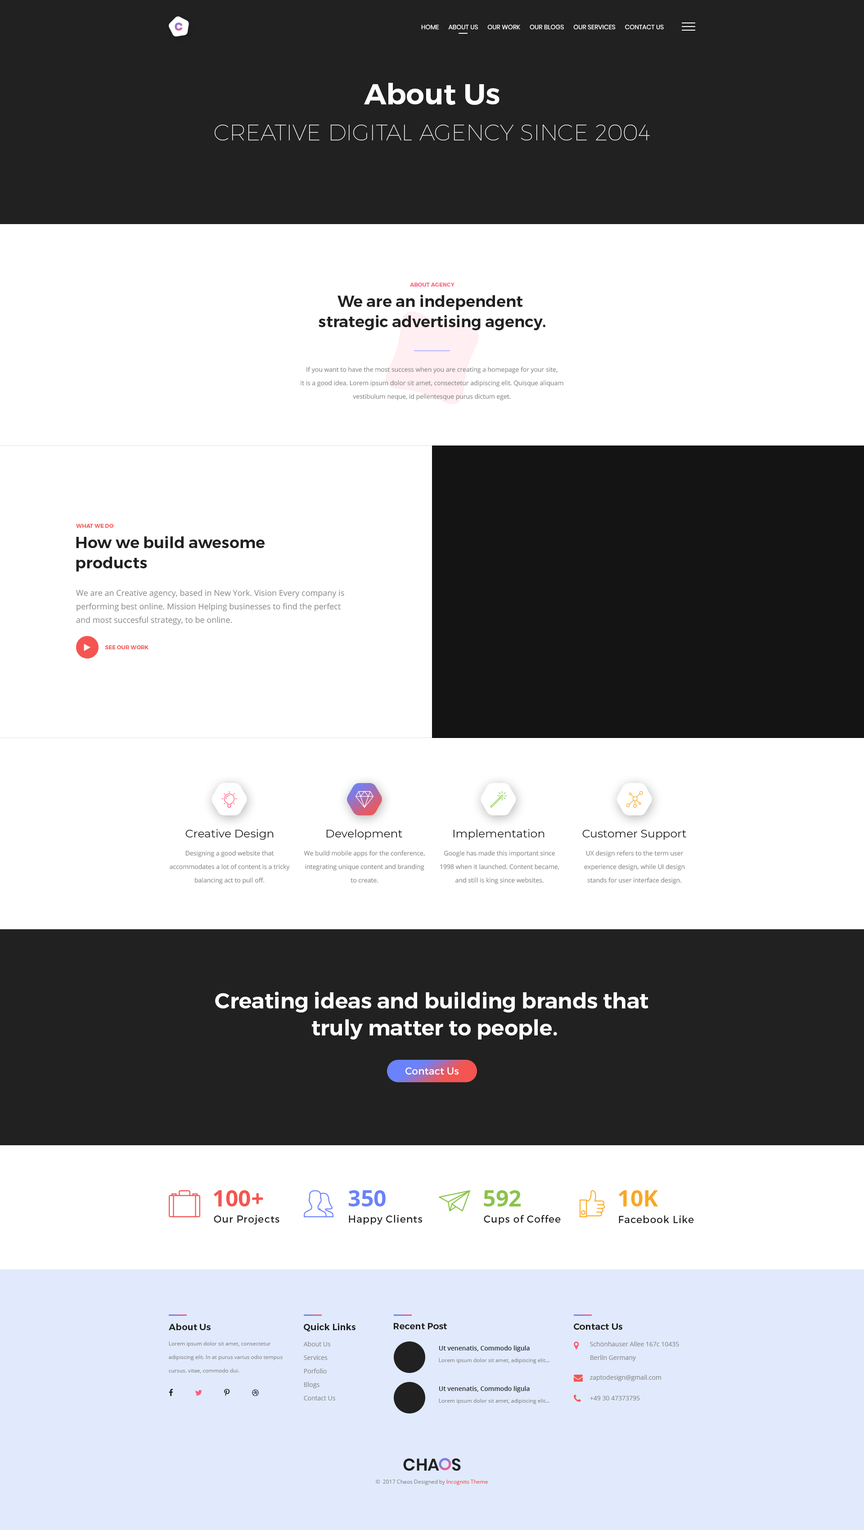
<style>
.page{position:relative;width:864px;height:1530px;background:#ffffff}
.page>*{position:absolute;margin:0}
.t1{font:11.2px "Poppins-ExtraBold";text-transform:uppercase}
.t2{font:6.3px "Poppins-Regular";color:#ffffff;text-transform:uppercase}
.t3{font:22.5px/36px "Montserrat-Hairline";color:#ffffff}
.t4{font:29.2px/36px "Montserrat-SemiBold";color:#ffffff}
.t5{font:5.4px "Montserrat-SemiBold";color:#fc5c7d;text-transform:uppercase}
.t6{font:15.7px/20.2px "Montserrat-SemiBold";color:#212121}
.t7{font:6.3px/13.5px "OpenSans";color:#878787}
.t8{font:5.4px "Montserrat-SemiBold";color:#f45551;text-transform:uppercase}
.t9{font:8.1px/13.5px "OpenSans";color:#878787}
.t10{font:11.2px "Montserrat-Regular";color:#141414}
.t11{font:21.6px/27px "Montserrat-SemiBold";color:#ffffff}
.t12{font:9.9px "Montserrat-Regular";color:#ffffff}
.t13{font:22.5px "OpenSans-Bold";color:#f45551;text-transform:uppercase}
.t14{font:22.5px "OpenSans-Bold";color:#6a82fb;text-transform:uppercase}
.t15{font:22.5px "OpenSans-Bold";color:#8bc34a;text-transform:uppercase}
.t16{font:22.5px "OpenSans-Bold";color:#f9a825;text-transform:uppercase}
.t17{font:9.9px "Montserrat-Regular";letter-spacing:0.05em;color:#212121}
.t18{font:9px "Montserrat-SemiBold";color:#212121}
.t19{font:5.4px/13.5px "OpenSans";color:#888888}
.t20{font:6.3px/13.5px "OpenSans";color:#888888}
.t21{font:6.3px "OpenSans-Semibold";color:#212121}
.t22{font:5.4px "OpenSans";color:#888888}
.t23{font:6.3px "OpenSans";color:#888888}
.t24{font:17px "Poppins-SemiBold";color:#212121;text-transform:uppercase}
.t25{font:5.4px "OpenSans";color:#f45551}
</style>
<div class="page">
<p class="t1" style="left:175px;top:22px;width:8px;height:9px">C</p>
<p class="t2" style="left:421px;top:24px;width:243px;height:6px">HOME      ABOUT US      Our Work      OUR BLOGS      Our SERVICES      CONTACT US</p>
<p class="t3" style="left:215px;top:83px;width:435px;height:57px;text-align:center"><span class="t4">About Us<br></span>CREATIVE DIGITAL AGENCY SINCE 2004</p>
<p class="t5" style="left:410px;top:283px;width:44px;height:4px">About Agency</p>
<p class="t6" style="left:319px;top:295px;width:226px;height:35px;text-align:center">We are an independent <br>strategic advertising agency.</p>
<p class="t7" style="left:301px;top:367px;width:262px;height:33px;text-align:center">If you want to have the most success when you are creating a homepage for your site, <br>it is a good idea. Lorem ipsum dolor sit amet, consectetur adipiscing elit. Quisque aliquam <br>vestibulum neque, id pellentesque purus dictum eget.</p>
<p class="t8" style="left:76px;top:524px;width:38px;height:4px">What We Do</p>
<p class="t6" style="left:76px;top:536px;width:189px;height:36px">How we build awesome<br>products</p>
<p class="t9" style="left:76px;top:590px;width:268px;height:35px">We are an Creative agency, based in New York. Vision Every company is performing best online. Mission Helping businesses to find the perfect and most succesful strategy, to be online.</p>
<p class="t8" style="left:105px;top:645px;width:43px;height:4px">See our work</p>
<p class="t10" style="left:185px;top:829px;width:89px;height:11px">Creative Design</p>
<p class="t10" style="left:326px;top:829px;width:76px;height:11px">Development</p>
<p class="t10" style="left:453px;top:829px;width:91px;height:11px">Implementation</p>
<p class="t10" style="left:582px;top:830px;width:104px;height:10px">Customer Support</p>
<p class="t7" style="left:170px;top:850px;width:120px;height:34px;text-align:center">Designing a good website that accommodates a lot of content is a tricky balancing act to pull off.</p>
<p class="t7" style="left:304px;top:850px;width:121px;height:33px;text-align:center">We build mobile apps for the conference, integrating unique content and branding to create.</p>
<p class="t7" style="left:440px;top:850px;width:119px;height:34px;text-align:center">Google has made this important since 1998 when it launched. Content became, and still is king since websites.</p>
<p class="t7" style="left:584px;top:850px;width:101px;height:34px;text-align:center">UX design refers to the term user experience design, while UI design stands for user interface design.</p>
<p class="t11" style="left:215px;top:991px;width:433px;height:49px;text-align:center">Creating ideas and building brands that <br>truly matter to people.</p>
<p class="t12" style="left:405px;top:1067px;width:54px;height:8px">Contact Us</p>
<p class="t13" style="left:214px;top:1190px;width:49px;height:16px">100+</p>
<p class="t14" style="left:348px;top:1190px;width:38px;height:16px">350</p>
<p class="t15" style="left:484px;top:1190px;width:37px;height:16px">592</p>
<p class="t16" style="left:619px;top:1190px;width:39px;height:16px">10k</p>
<p class="t17" style="left:214px;top:1215px;width:65px;height:9px">Our Projects</p>
<p class="t17" style="left:349px;top:1215px;width:73px;height:9px">Happy Clients</p>
<p class="t17" style="left:484px;top:1215px;width:77px;height:9px">Cups of Coffee</p>
<p class="t17" style="left:619px;top:1215px;width:75px;height:8px">Facebook Like</p>
<p class="t18" style="left:169px;top:1323px;width:42px;height:7px">About Us</p>
<p class="t18" style="left:304px;top:1323px;width:52px;height:9px">Quick Links</p>
<p class="t18" style="left:394px;top:1323px;width:53px;height:6px">Recent Post</p>
<p class="t18" style="left:574px;top:1323px;width:48px;height:7px">Contact Us</p>
<p class="t19" style="left:169px;top:1341px;width:114px;height:32px">Lorem ipsum dolor sit amet, consectetur adipiscing elit. In at purus varius odio tempus cursus. vitae, commodo dui.</p>
<p class="t20" style="left:303px;top:1341px;width:32px;height:59px">About Us<br>Services<br>Porfolio<br>Blogs<br>Contact Us</p>
<p class="t21" style="left:439px;top:1346px;width:91px;height:6px">Ut venenatis, Commodo ligula</p>
<p class="t20" style="left:590px;top:1341px;width:89px;height:20px">Schönhauser Allee 167c 10435 <br>Berlin Germany</p>
<p class="t22" style="left:439px;top:1358px;width:110px;height:6px">Lorem ipsum dolor sit amet, adipiscing elit...</p>
<p class="t23" style="left:590px;top:1375px;width:71px;height:6px">zaptodesign@gmail.com</p>
<p class="t21" style="left:439px;top:1386px;width:91px;height:6px">Ut venenatis, Commodo ligula</p>
<p class="t23" style="left:590px;top:1396px;width:50px;height:4px">+49 30 47373795</p>
<p class="t22" style="left:439px;top:1399px;width:110px;height:5px">Lorem ipsum dolor sit amet, adipiscing elit...</p>
<p class="t24" style="left:403px;top:1458px;width:58px;height:13px">Cha s</p>
<p class="t22" style="left:376px;top:1480px;width:112px;height:5px">©  2017 Chaos Designed by <span class="t25">Incognito Theme</span></p>
</div>
